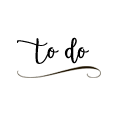
<style>
.page{position:relative;width:120px;height:120px;background:#ffffff}
.page>*{position:absolute;margin:0}
.t1{font:51.7px "Morable";color:#000000}
</style>
<div class="page">
<p class="t1" style="left:17px;top:37px;width:72px;height:27px">to do</p>
</div>
